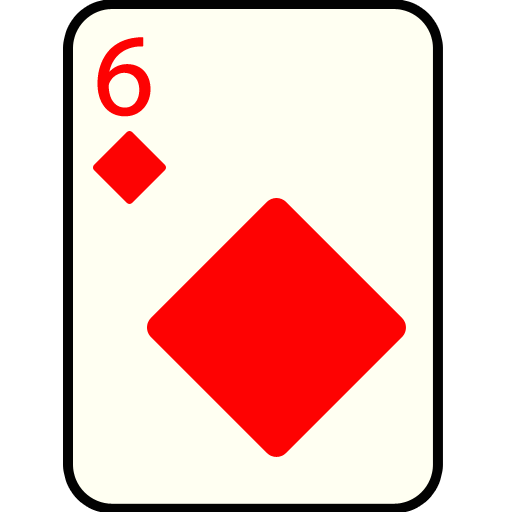
<style>
.page{position:relative;width:512px;height:512px;background:#fffff2}
.page>*{position:absolute;margin:0}
.t1{font:200px "MyriadPro-Regular";letter-spacing:-0.05em;color:#fd0202;font-variant:small-caps;font-weight:bold}
</style>
<div class="page">
<p class="t1" style="left:97px;top:37px;width:54px;height:80px">6</p>
</div>
